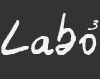
<style>
.page{position:relative;width:100px;height:79px;background:#333333}
.page>*{position:absolute;margin:0}
.t1{font:58.9px "Georges";color:#f2f2f2}
.t2{font:58.9px "Georges";letter-spacing:-0.14em;color:#f2f2f2}
.t3{font:18.5px "Georges";letter-spacing:-0.14em;color:#f2f2f2}
</style>
<div class="page">
<p class="t1" style="left:1px;top:13px;width:96px;height:42px"><span class="t2">L</span>abo</p>
<p class="t3" style="left:87px;top:20px;width:12px;height:10px">3</p>
</div>
